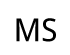
<style>
.page{position:relative;width:70px;height:55px;background:#ffffff}
.page>*{position:absolute;margin:0}
.t1{font:31.8px "DroidSans";color:#000000}
</style>
<div class="page">
<p class="t1" style="left:16px;top:18px;width:40px;height:24px">MS</p>
</div>
